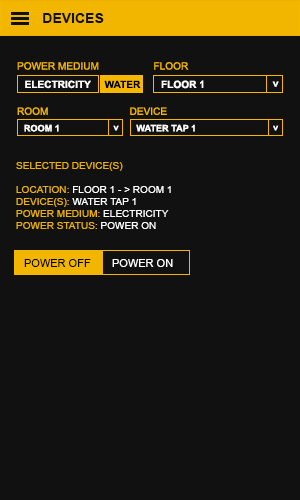
<style>
.page{position:relative;width:300px;height:500px;background:#111111}
.page>*{position:absolute;margin:0}
.t1{font:14px "Arial-BoldMT";color:#111111}
.t2{font:10.1px "ArialMT";color:#f5b800}
.t3{font:10.1px "Arial-BoldMT";color:#ffffff;text-transform:uppercase}
.t4{font:10.1px "Arial-BoldMT";color:#000000;text-transform:uppercase}
.t5{font:10.1px "Arial-BoldMT";color:#ffffff}
.t6{font:9.1px "Arial-BoldMT";color:#ffffff;text-transform:uppercase}
.t7{font:9.1px "Arial-BoldMT";color:#ffffff}
.t8{font:10.1px "ArialMT";color:#ebb200}
.t9{font:10.1px "ArialMT";color:#ffffff}
.t10{font:11px "ArialMT";color:#000000}
.t11{font:11px "ArialMT";color:#ffffff}
</style>
<div class="page">
<p class="t1" style="left:43px;top:13px;width:61px;height:10px">DEVICES</p>
<p class="t2" style="left:17px;top:62px;width:82px;height:8px">POWER MEDIUM</p>
<p class="t2" style="left:154px;top:62px;width:35px;height:8px">FLOOR</p>
<p class="t3" style="left:25px;top:80px;width:66px;height:9px">Electricity</p>
<p class="t4" style="left:104px;top:80px;width:37px;height:8px">WATER</p>
<p class="t3" style="left:161px;top:80px;width:43px;height:9px">FLOOR 1</p>
<p class="t5" style="left:272px;top:81px;width:7px;height:6px;rotate:-90deg">&lt;</p>
<p class="t2" style="left:17px;top:107px;width:31px;height:8px">ROOM</p>
<p class="t2" style="left:130px;top:107px;width:37px;height:8px">DEVICE</p>
<p class="t6" style="left:24px;top:124px;width:35px;height:8px">ROOM 1</p>
<p class="t7" style="left:113px;top:125px;width:6px;height:6px;rotate:-90deg">&lt;</p>
<p class="t6" style="left:136px;top:124px;width:59px;height:8px">WATER TAP 1</p>
<p class="t7" style="left:273px;top:125px;width:6px;height:6px;rotate:-90deg">&lt;</p>
<p class="t8" style="left:16px;top:162px;width:155px;height:67px">SELECTED DEVICE(S)<br><br>LOCATION: <span class="t9">FLOOR 1 - &gt; ROOM 1<br></span>DEVICE(S): <span class="t9">WATER TAP 1<br></span>POWER MEDIUM: <span class="t9">ELECTRICITY<br></span>POWER STATUS: <span class="t9">POWER ON</span></p>
<p class="t10" style="left:24px;top:259px;width:67px;height:8px">POWER OFF</p>
<p class="t11" style="left:112px;top:259px;width:61px;height:8px">POWER ON</p>
</div>
